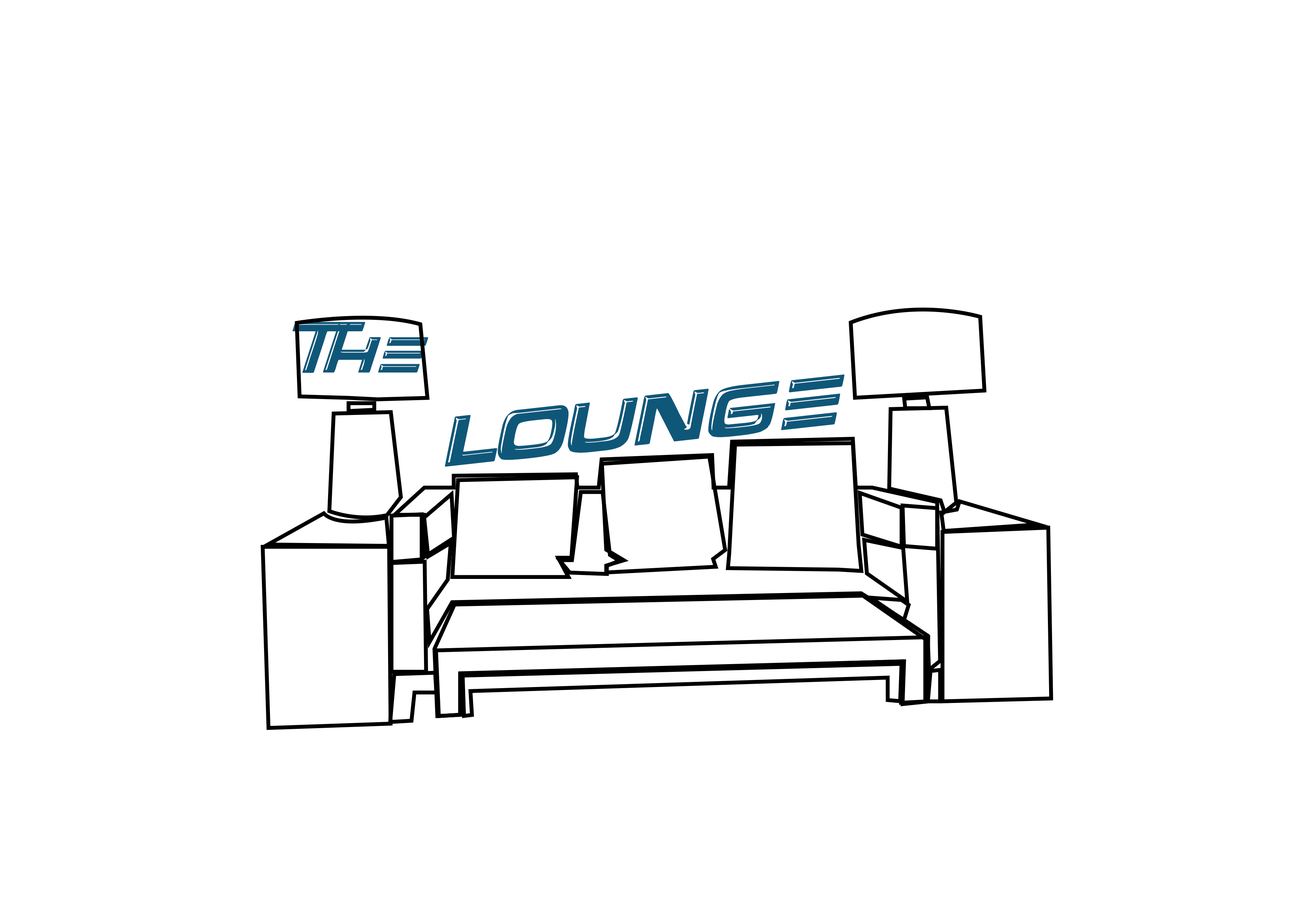
<style>
.page{position:relative;width:1299px;height:918px;background:#ffffff}
.page>*{position:absolute;margin:0}
.t1{font:37px "OverThere";color:#0f5779}
.t2{font:50.9px "OverThere";color:#0f5779}
</style>
<div class="page">
<p class="t1" style="left:292px;top:322px;width:136px;height:51px">The</p>
<p class="t2" style="left:445px;top:374px;width:399px;height:93px;rotate:-6deg">Lounge</p>
</div>
